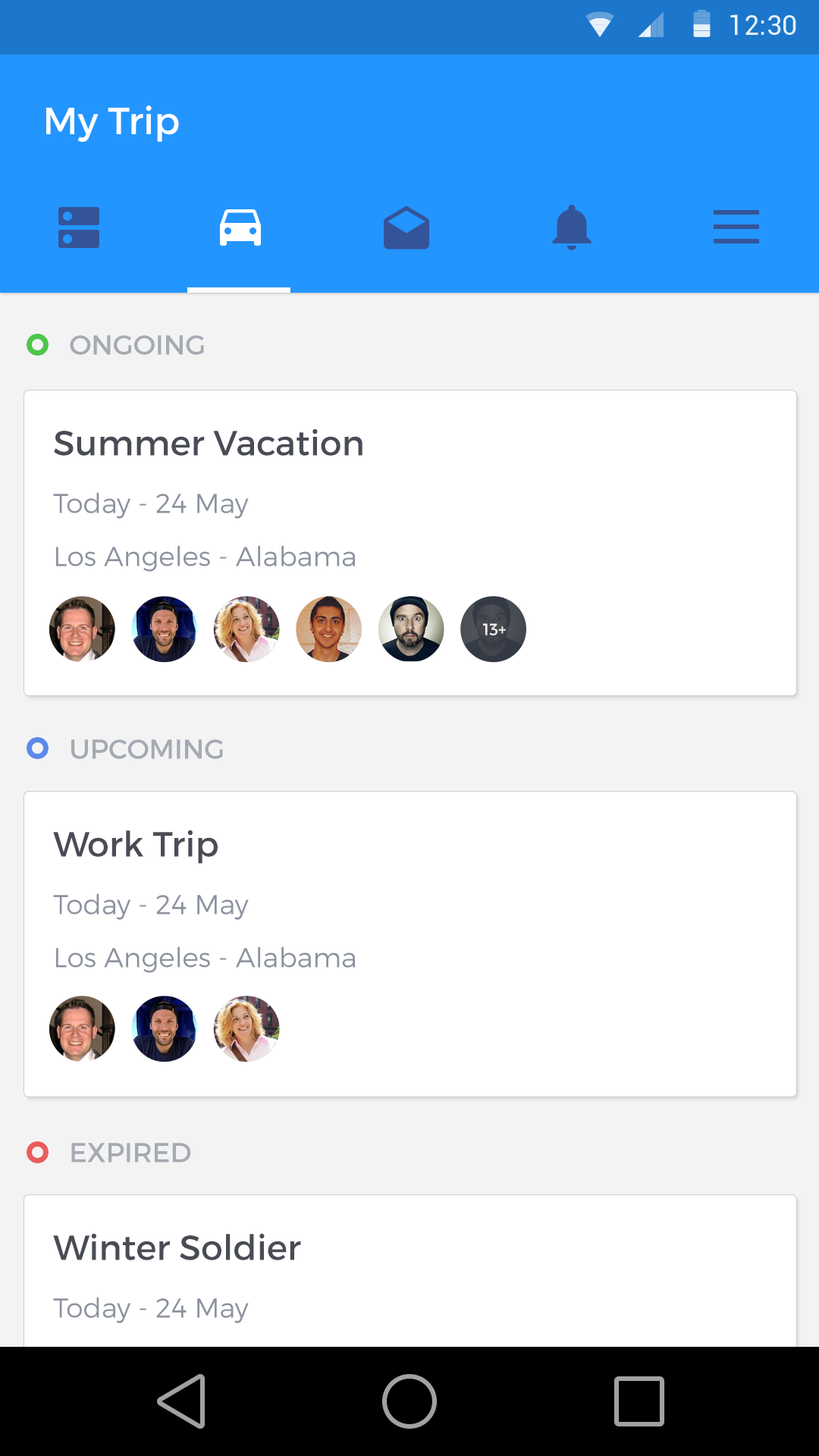
<style>
.page{position:relative;width:819px;height:1456px;background:#ffffff}
.page>*{position:absolute;margin:0}
.t1{font:37.9px "Montserrat-Regular";color:#ffffff}
.t2{font:27.3px "Montserrat-Regular";color:#a5aab3}
.t3{font:34.9px "Montserrat-Regular";color:#494c55}
.t4{font:27.3px "Montserrat-Light";color:#8c929f}
.t5{font:16.5px "Montserrat-Regular";color:#ffffff}
</style>
<div class="page">
<p class="t1" style="left:46px;top:105px;width:133px;height:37px">My Trip</p>
<p class="t2" style="left:70px;top:335px;width:134px;height:20px">ONGOING</p>
<p class="t3" style="left:54px;top:428px;width:308px;height:28px">Summer Vacation</p>
<p class="t4" style="left:53px;top:492px;width:196px;height:27px">Today - 24 May</p>
<p class="t4" style="left:56px;top:545px;width:299px;height:27px">Los Angeles - Alabama</p>
<p class="t5" style="left:483px;top:623px;width:23px;height:12px">13+</p>
<p class="t2" style="left:71px;top:739px;width:152px;height:20px">UPCOMING</p>
<p class="t3" style="left:53px;top:830px;width:165px;height:34px">Work Trip</p>
<p class="t4" style="left:53px;top:893px;width:196px;height:27px">Today - 24 May</p>
<p class="t4" style="left:56px;top:946px;width:299px;height:27px">Los Angeles - Alabama</p>
<p class="t2" style="left:71px;top:1143px;width:120px;height:20px">EXPIRED</p>
<p class="t3" style="left:53px;top:1233px;width:248px;height:27px">Winter Soldier</p>
<p class="t4" style="left:53px;top:1297px;width:196px;height:26px">Today - 24 May</p>
</div>
